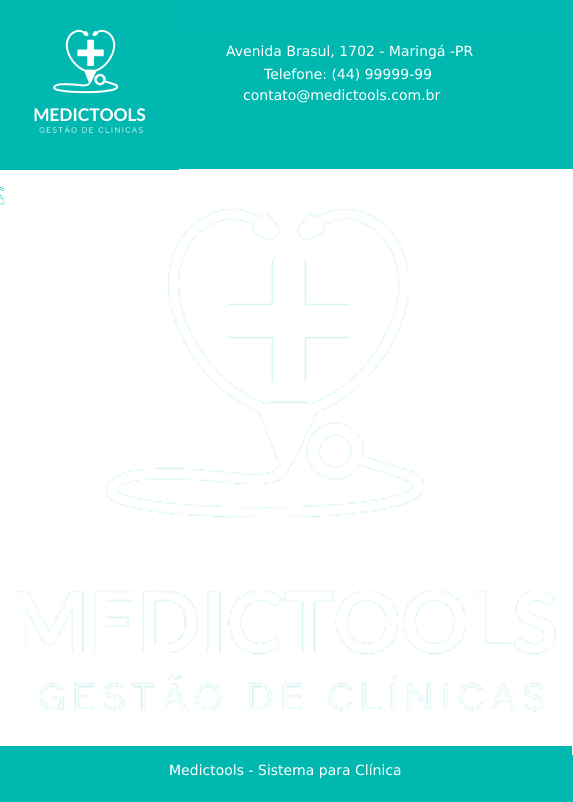
<style>
.page{position:relative;width:573px;height:802px;background:#ffffff}
.page>*{position:absolute;margin:0}
.t1{font:14px "DejaVuSans";color:#ffffff}
</style>
<div class="page">
<p class="t1" style="left:226px;top:44px;width:247px;height:15px">Avenida Brasul, 1702 - Maringá -PR</p>
<p class="t1" style="left:263px;top:68px;width:169px;height:13px">Telefone: (44) 99999-99</p>
<p class="t1" style="left:243px;top:89px;width:198px;height:14px">contato@medictools.com.br</p>
<p class="t1" style="left:170px;top:763px;width:231px;height:15px">Medictools - Sistema para Clínica</p>
</div>
